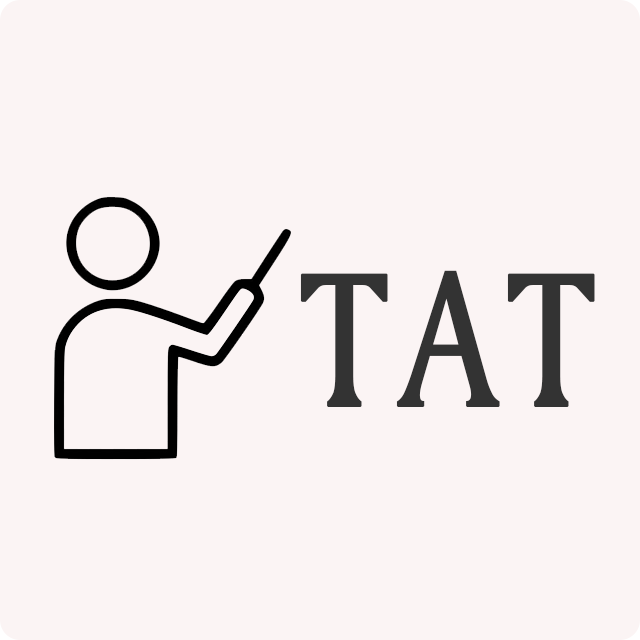
<style>
.page{position:relative;width:640px;height:640px;background:#fbf4f4}
.page>*{position:absolute;margin:0}
.t1{font:201px "WeibeiSC-Bold";color:#333333;font-weight:bold;scale:0.81 1}
</style>
<div class="page">
<p class="t1" style="left:300px;top:270px;width:295px;height:137px">TAT</p>
</div>
